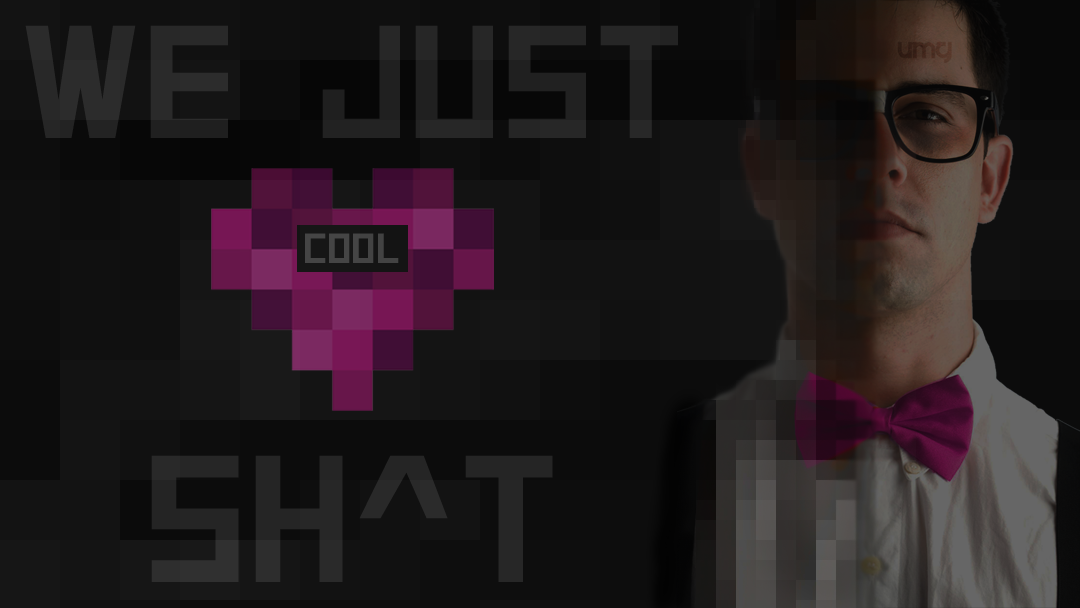
<style>
.page{position:relative;width:1080px;height:608px}
.page>*{position:absolute;margin:0}
.t1{font:160px "SquareFont";color:#262626}
.t2{font:42px "SquareFont";color:#454545}
.t3{font:180px "SquareFont";color:#262626}
</style>
<div class="page">
<p class="t1" style="left:25px;top:25px;width:653px;height:113px">WE  JUST</p>
<p class="t2" style="left:305px;top:233px;width:94px;height:30px">COOL</p>
<p class="t3" style="left:151px;top:455px;width:402px;height:127px">SH^T</p>
</div>
